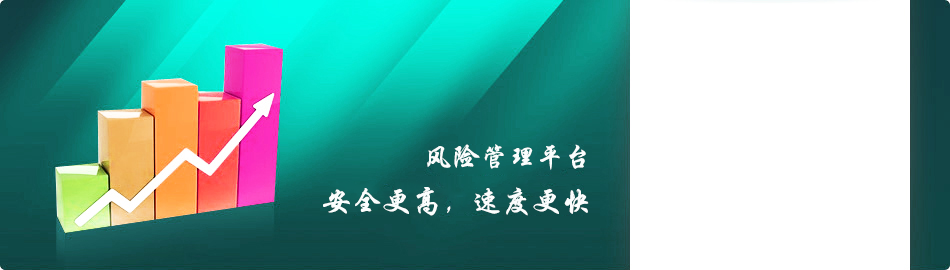
<style>
.page{position:relative;width:950px;height:270px;background:#ffffff}
.page>*{position:absolute;margin:0}
.t1{font:28px "STXingkai";color:#fafdfd}
.t2{font:30px "STXingkai";color:#fafdfd}
</style>
<div class="page">
<p class="t1" style="left:427px;top:144px;width:159px;height:26px">风险管理平台</p>
<p class="t2" style="left:323px;top:187px;width:266px;height:29px">安全更高，速度更快</p>
</div>
